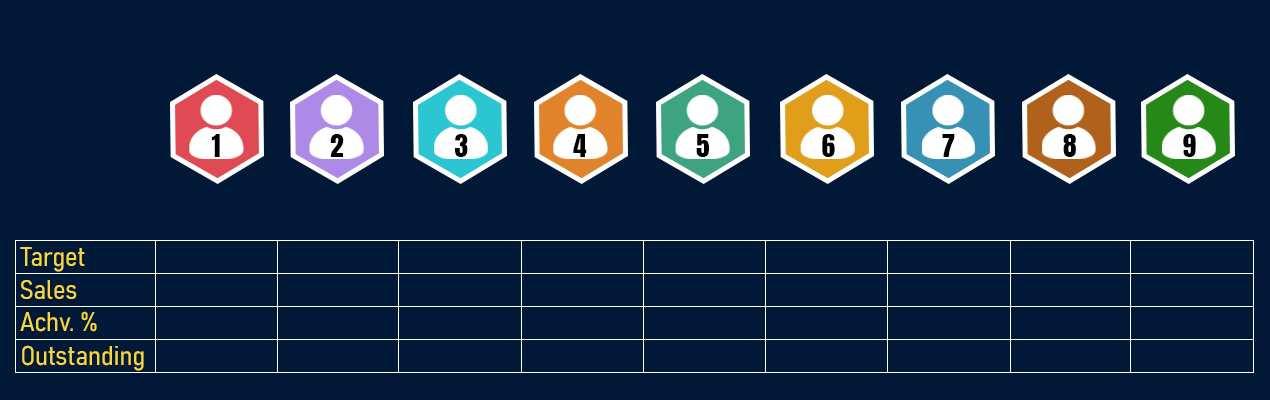
<style>
.page{position:relative;width:1270px;height:400px;background:#011936}
.page>*{position:absolute;margin:0}
.t1{font:27.4px "Anton-Regular";color:#000000}
.t2{font:26.7px "Bahnschrift-SemiLightSemiCondensed";color:#f9d73b}
</style>
<div class="page">
<p class="t1" style="left:211px;top:134px;width:9px;height:23px">1</p>
<p class="t1" style="left:330px;top:134px;width:14px;height:23px">2</p>
<p class="t1" style="left:455px;top:134px;width:13px;height:23px">3</p>
<p class="t1" style="left:573px;top:134px;width:14px;height:23px">4</p>
<p class="t1" style="left:696px;top:134px;width:14px;height:23px">5</p>
<p class="t1" style="left:822px;top:134px;width:13px;height:23px">6</p>
<p class="t1" style="left:942px;top:134px;width:13px;height:23px">7</p>
<p class="t1" style="left:1063px;top:134px;width:13px;height:23px">8</p>
<p class="t1" style="left:1183px;top:134px;width:13px;height:23px">9</p>
<p class="t2" style="left:20px;top:247px;width:65px;height:25px">Target</p>
<p class="t2" style="left:20px;top:280px;width:57px;height:19px">Sales</p>
<p class="t2" style="left:20px;top:311px;width:77px;height:21px">Achv. %</p>
<p class="t2" style="left:22px;top:345px;width:122px;height:26px">Outstanding</p>
</div>
